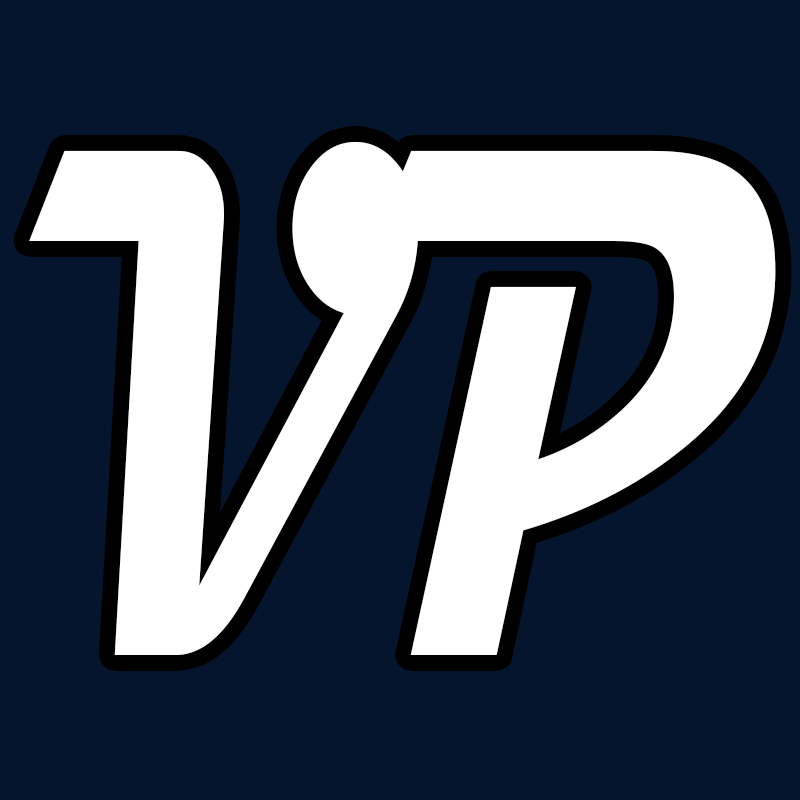
<style>
.page{position:relative;width:800px;height:800px;background:#05152e}
.page>*{position:absolute;margin:0}
.t1{font:732.7px "Magneto-Bold";letter-spacing:-0.06em;color:#ffffff;scale:0.66 1}
</style>
<div class="page">
<p class="t1" style="left:29px;top:141px;width:747px;height:514px">VP</p>
</div>
